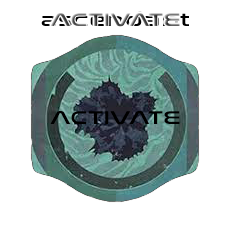
<style>
.page{position:relative;width:230px;height:236px;background:#ffffff}
.page>*{position:absolute;margin:0}
.t1{font:18.9px "NasalizationRg-Regular";scale:1.39 1}
.t2{font:18.9px "NasalizationRg-Regular";color:#000000;scale:1.39 1}
</style>
<div class="page">
<p class="t1" style="left:41px;top:11px;width:148px;height:15px">ascendant</p>
<p class="t1" style="left:50px;top:13px;width:130px;height:14px">ACTIVATE</p>
<p class="t1" style="left:50px;top:13px;width:130px;height:14px">ACTIVATE</p>
<p class="t2" style="left:50px;top:111px;width:130px;height:14px">ACTIVATE</p>
<p class="t2" style="left:50px;top:111px;width:130px;height:14px">ACTIVATE</p>
<p class="t2" style="left:50px;top:111px;width:130px;height:14px">ACTIVATE</p>
<p class="t2" style="left:50px;top:111px;width:130px;height:14px">ACTIVATE</p>
<p class="t2" style="left:50px;top:111px;width:130px;height:14px">ACTIVATE</p>
<p class="t2" style="left:50px;top:111px;width:130px;height:14px">ACTIVATE</p>
<p class="t2" style="left:50px;top:111px;width:130px;height:14px">ACTIVATE</p>
<p class="t2" style="left:50px;top:111px;width:130px;height:14px">ACTIVATE</p>
<p class="t2" style="left:50px;top:111px;width:130px;height:14px">ACTIVATE</p>
</div>
